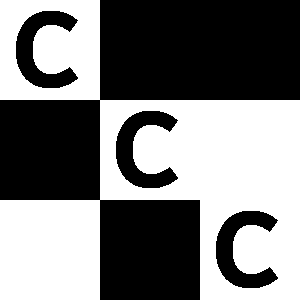
<style>
.page{position:relative;width:300px;height:300px;background:#000000}
.page>*{position:absolute;margin:0}
.t1{font:133.2px "FiraCode-Regular";letter-spacing:-0.04em;color:#000000;font-weight:bold}
</style>
<div class="page">
<p class="t1" style="left:16px;top:11px;width:62px;height:77px">c</p>
<p class="t1" style="left:116px;top:111px;width:62px;height:77px">c</p>
<p class="t1" style="left:216px;top:211px;width:62px;height:77px">c</p>
</div>
